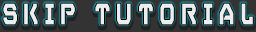
<style>
.page{position:relative;width:256px;height:32px;background:#333333}
.page>*{position:absolute;margin:0}
.t1{font:27.8px "VoyagerGrotesqueBold";letter-spacing:0.3em;color:#ffffff;scale:0.81 1}
</style>
<div class="page">
<p class="t1" style="left:3px;top:3px;width:250px;height:22px">SKIP TUTORIAL</p>
</div>
